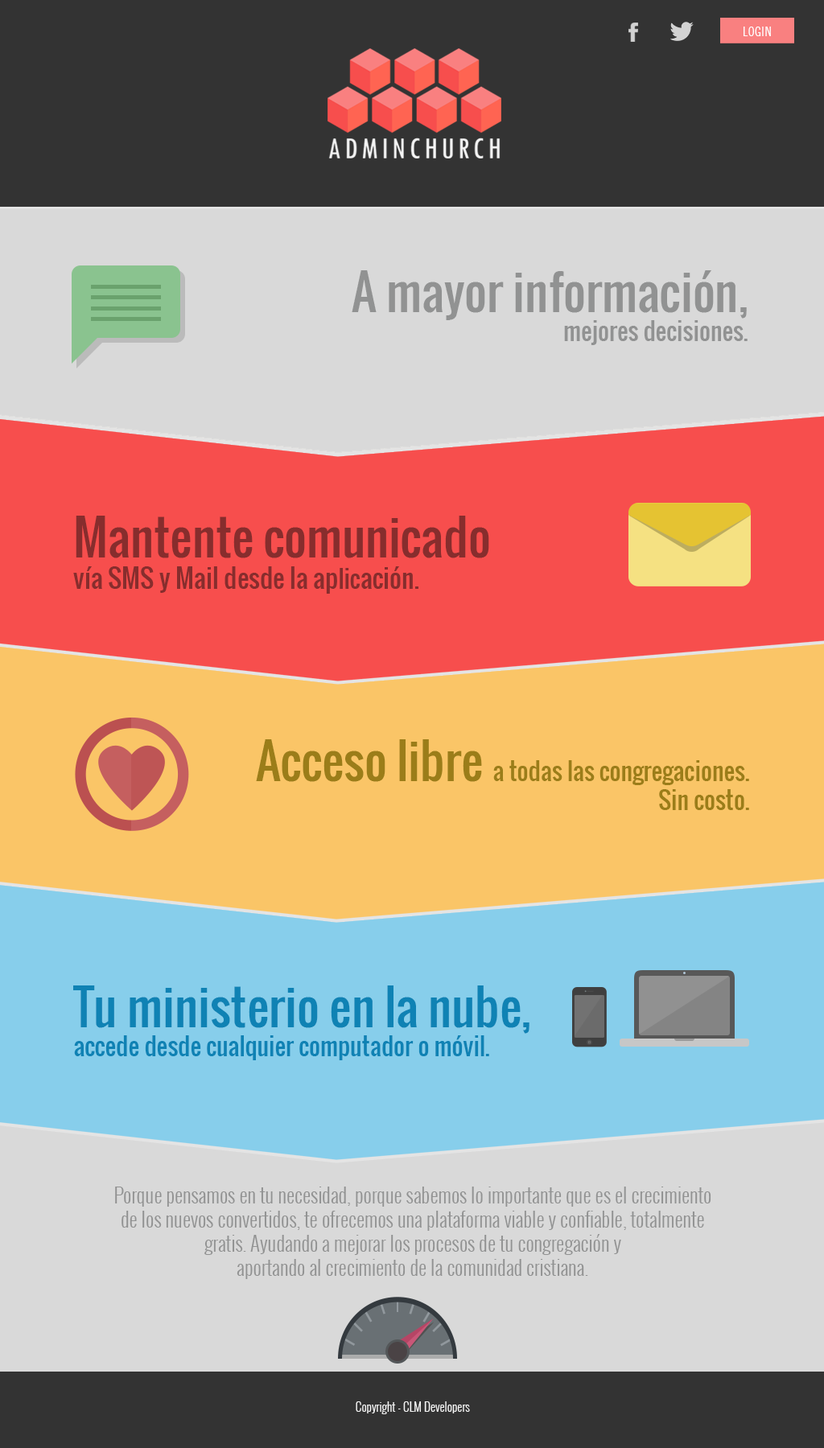
<style>
.page{position:relative;width:824px;height:1448px;background:#d9d9d9}
.page>*{position:absolute;margin:0}
.t1{font:12.9px "NewsGothicBT-RomanCondensed";letter-spacing:0.04em;color:#ffffff;text-transform:uppercase}
.t2{font:48.3px "Oswald-Regular";color:#919292}
.t3{font:24.1px "Oswald-Regular";color:#919292}
.t4{font:25.7px "Oswald-Regular";color:#872d2d}
.t5{font:48.3px "Oswald-Regular";color:#872d2d}
.t6{font:24.1px "Oswald-Regular";color:#872d2d}
.t7{font:24.1px "Oswald-Regular";color:#9b7d19}
.t8{font:48.3px "Oswald-Regular";color:#9b7d19}
.t9{font:24.1px "Oswald-Regular";color:#0f82b4}
.t10{font:48.3px "Oswald-Regular";color:#0f82b4}
.t11{font:20.1px "Oswald-Light";color:#919292}
.t12{font:12.1px "Oswald-Light";color:#f4f4f4}
</style>
<div class="page">
<p class="t1" style="left:743px;top:27px;width:28px;height:9px">LOGIN</p>
<p class="t2" style="left:351px;top:270px;width:396px;height:75px;text-align:right">A mayor información,<br><span class="t3">mejores decisiones.</span></p>
<p class="t4" style="left:73px;top:516px;width:416px;height:78px"><span class="t5">Mantente comunicado <br></span>vía SMS y Mail desde la ap<span class="t6">lic</span>ación.</p>
<p class="t7" style="left:256px;top:739px;width:493px;height:71px;text-align:right"><span class="t8">Acceso libre </span>a todas las congregaciones. <br>Sin costo.</p>
<p class="t9" style="left:73px;top:985px;width:456px;height:75px"><span class="t10">Tu ministerio en la nube,<br></span>accede desde cualquier computador o móvil.</p>
<p class="t11" style="left:115px;top:1186px;width:596px;height:93px;text-align:center">Porque pensamos en tu necesidad, porque sabemos lo importante que es el crecimiento <br>de los nuevos convertidos, te ofrecemos una plataforma viable y confiable, totalmente<br>gratis. Ayudando a mejorar los procesos de tu congregación y <br>aportando al crecimiento de la comunidad cristiana.</p>
<p class="t12" style="left:356px;top:1401px;width:114px;height:13px">Copyright - CLM Developers</p>
</div>
